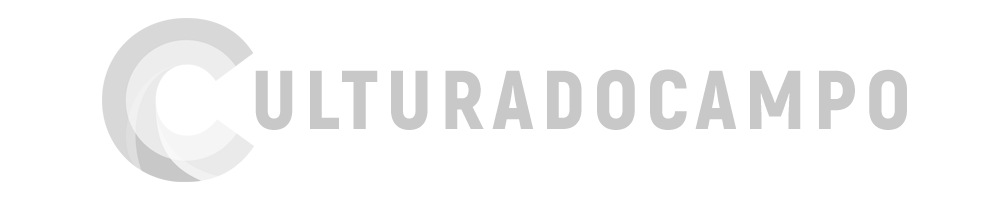
<style>
.page{position:relative;width:1000px;height:200px;background:#ffffff}
.page>*{position:absolute;margin:0}
.t1{font:83.3px "Akrobat-Black";letter-spacing:0.1em;color:#c8c8c8;text-transform:uppercase}
</style>
<div class="page">
<p class="t1" style="left:255px;top:69px;width:652px;height:61px">ulturadocampo</p>
</div>
